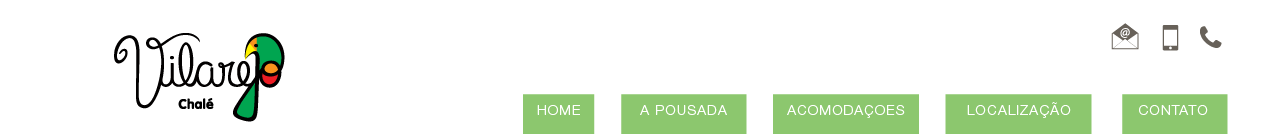
<style>
.page{position:relative;width:1280px;height:134px;background:#ffffff}
.page>*{position:absolute;margin:0}
.t1{font:14px "HelveticaNeueLTStd-Lt";letter-spacing:0.075em;color:#ffffff}
</style>
<div class="page">
<p class="t1" style="left:967px;top:102px;width:104px;height:16px">LOCALIZAÇÃO</p>
<p class="t1" style="left:967px;top:102px;width:104px;height:16px">LOCALIZAÇÃO</p>
<p class="t1" style="left:537px;top:105px;width:43px;height:10px">HOME</p>
<p class="t1" style="left:640px;top:105px;width:87px;height:10px">A POUSADA</p>
<p class="t1" style="left:640px;top:105px;width:87px;height:10px">A POUSADA</p>
<p class="t1" style="left:787px;top:105px;width:118px;height:13px">ACOMODAÇOES</p>
<p class="t1" style="left:787px;top:105px;width:118px;height:13px">ACOMODAÇOES</p>
<p class="t1" style="left:1139px;top:105px;width:69px;height:10px">CONTATO</p>
<p class="t1" style="left:1139px;top:105px;width:69px;height:10px">CONTATO</p>
</div>
